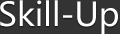
<style>
.page{position:relative;width:120px;height:34px;background:#333333}
.page>*{position:absolute;margin:0}
.t1{font:32.2px "MicrosoftYaHei";color:#ffffff}
</style>
<div class="page">
<p class="t1" style="left:0px;top:0px;width:118px;height:34px">Skill-Up</p>
</div>
